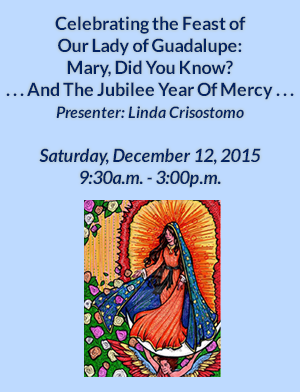
<style>
.page{position:relative;width:300px;height:392px;background:#bedaff}
.page>*{position:absolute;margin:0}
.t1{font:18px/22px "Lato-Bold";color:#032465}
.t2{font:16px/22px "Lato-BoldItalic";color:#032465}
.t3{font:18px/22px "Lato-BoldItalic";color:#032465}
</style>
<div class="page">
<p class="t1" style="left:6px;top:16px;width:288px;height:172px;text-align:center">Celebrating the Feast of <br>Our Lady of Guadalupe: <br>Mary, Did You Know? <br>. . . And The Jubilee Year Of Mercy . . .<br><span class="t2">Presenter: Linda Crisostomo<br><br></span><span class="t3">Saturday, December 12, 2015<br>9:30a.m. - 3:00p.m.</span></p>
</div>
